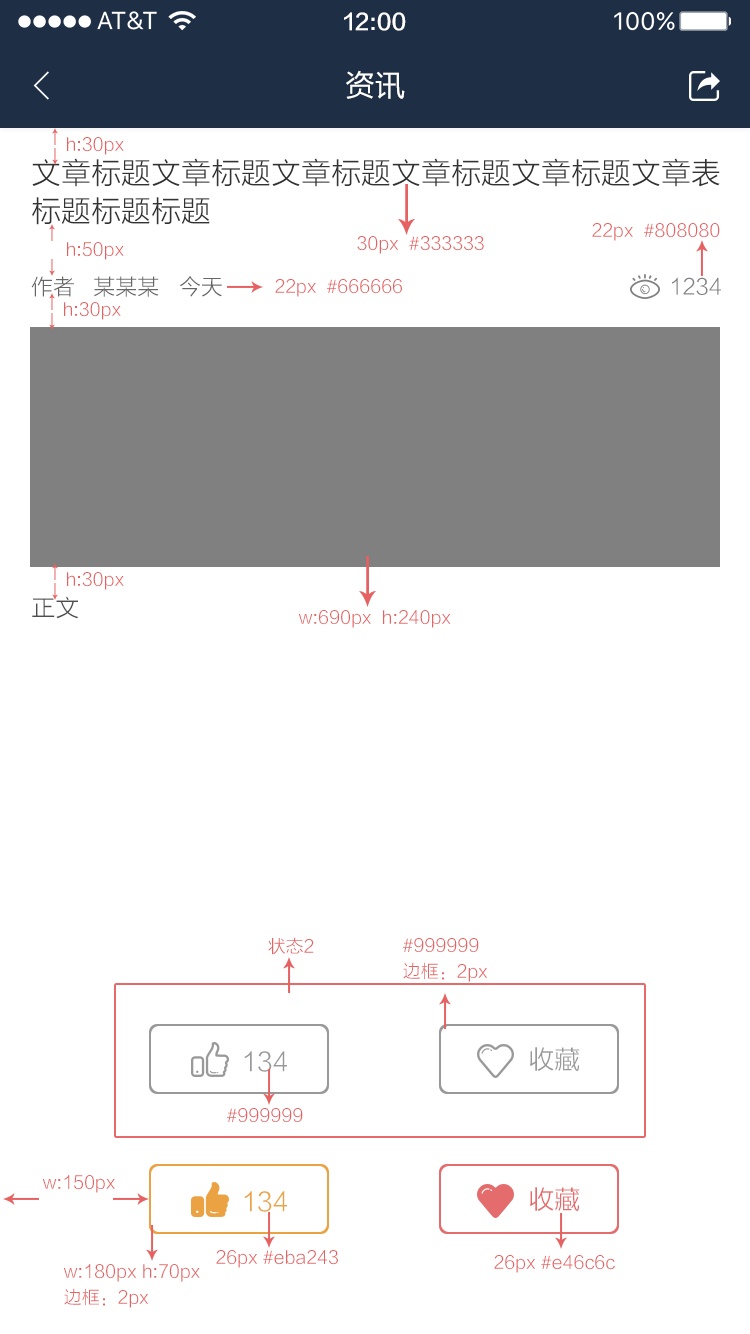
<style>
.page{position:relative;width:750px;height:1334px;background:#ffffff}
.page>*{position:absolute;margin:0}
.t1{font:22px "FZLTZHK--GBK1-0";color:#ffffff}
.t2{font:30px "FZLTHJW--GB1-0";color:#ffffff}
.t3{font:18px "FZLTXHK";color:#e66262}
.t4{font:30px/38px "FZLTXHK";color:#333333}
.t5{font:22px "FZLTXHK";color:#666666}
.t6{font:22px "FZLTXHK";color:#808080}
.t7{font:24px "FZLTXHK";color:#4d4d4d}
.t8{font:18px/26px "FZLTXHK";color:#e66262}
.t9{font:26px "FZLTXHK";color:#999999}
.t10{font:26px "FZLTXHK";color:#eba243}
.t11{font:26px "FZLTXHK";color:#e46c6c}
</style>
<div class="page">
<p class="t1" style="left:344px;top:12px;width:62px;height:19px">12:00</p>
<p class="t2" style="left:346px;top:70px;width:59px;height:29px">资讯</p>
<p class="t3" style="left:67px;top:137px;width:57px;height:18px">h:30px</p>
<p class="t4" style="left:32px;top:158px;width:688px;height:67px">文章标题文章标题文章标题文章标题文章标题文章表<br>标题标题标题</p>
<p class="t3" style="left:592px;top:223px;width:128px;height:18px">22px  #808080</p>
<p class="t3" style="left:67px;top:242px;width:57px;height:18px">h:50px</p>
<p class="t3" style="left:357px;top:236px;width:127px;height:18px">30px  #333333</p>
<p class="t5" style="left:31px;top:276px;width:128px;height:21px">作者   某某某</p>
<p class="t5" style="left:180px;top:276px;width:42px;height:21px">今天</p>
<p class="t3" style="left:275px;top:279px;width:127px;height:18px">22px  #666666</p>
<p class="t6" style="left:672px;top:277px;width:49px;height:18px">1234</p>
<p class="t3" style="left:64px;top:302px;width:57px;height:18px">h:30px</p>
<p class="t3" style="left:67px;top:572px;width:57px;height:18px">h:30px</p>
<p class="t7" style="left:32px;top:596px;width:46px;height:23px">正文</p>
<p class="t3" style="left:298px;top:610px;width:153px;height:18px">w:690px  h:240px</p>
<p class="t3" style="left:268px;top:937px;width:46px;height:18px">状态2</p>
<p class="t8" style="left:403px;top:938px;width:84px;height:44px">#999999<br>边框：2px</p>
<p class="t9" style="left:530px;top:1047px;width:50px;height:24px">收藏</p>
<p class="t9" style="left:244px;top:1051px;width:43px;height:21px">134</p>
<p class="t3" style="left:227px;top:1108px;width:76px;height:15px">#999999</p>
<p class="t3" style="left:42px;top:1175px;width:73px;height:18px">w:150px</p>
<p class="t10" style="left:244px;top:1191px;width:43px;height:21px">134</p>
<p class="t11" style="left:530px;top:1187px;width:50px;height:24px">收藏</p>
<p class="t3" style="left:216px;top:1250px;width:122px;height:18px">26px #eba243</p>
<p class="t8" style="left:63px;top:1264px;width:137px;height:44px">w:180px h:70px<br>边框：2px</p>
<p class="t3" style="left:494px;top:1255px;width:121px;height:18px">26px #e46c6c</p>
</div>
